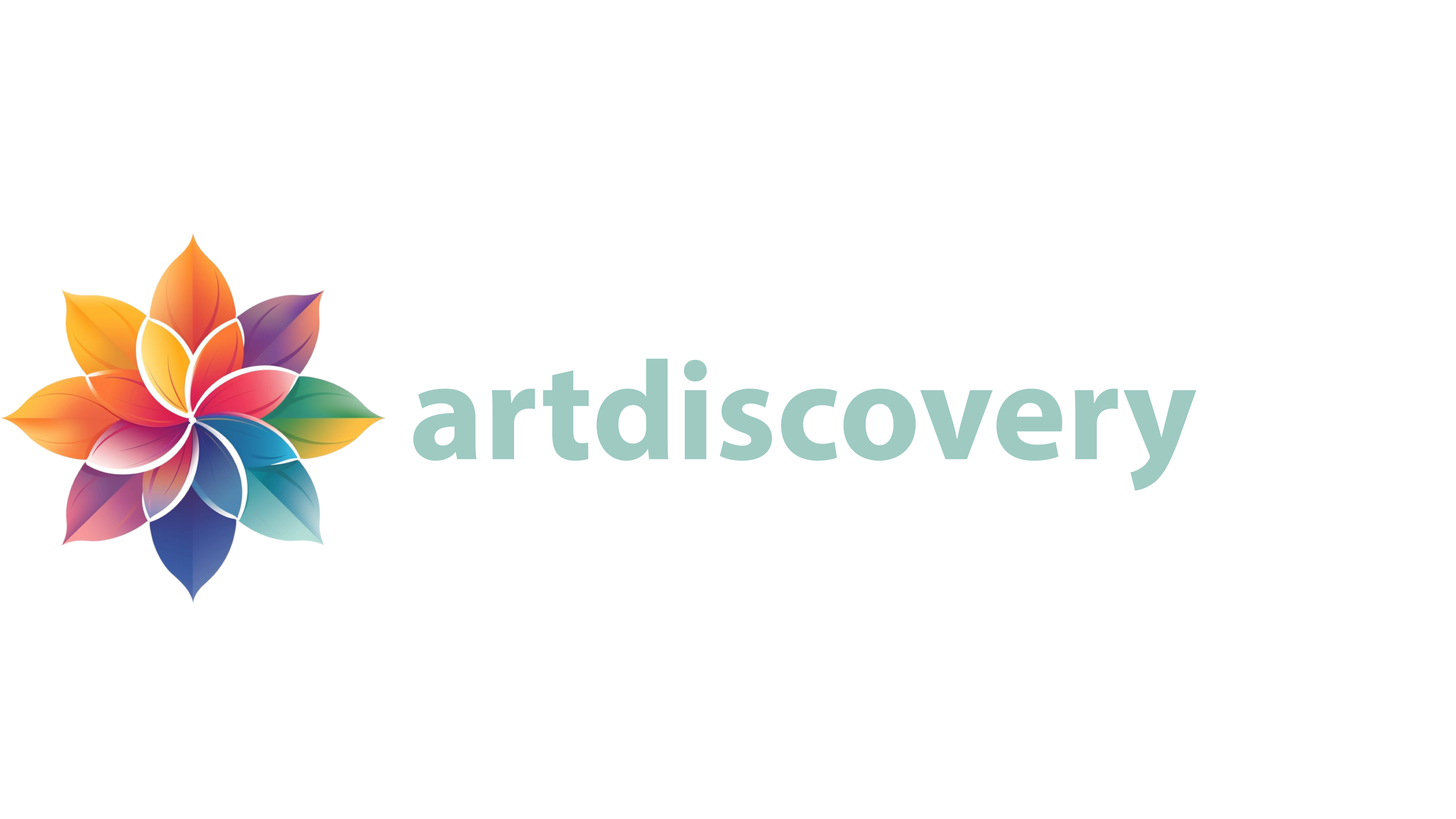
<style>
.page{position:relative;width:1456px;height:819px;background:#ffffff}
.page>*{position:absolute;margin:0}
.t1{font:141.4px "MyriadPro-Bold";color:#9ecac2}
</style>
<div class="page">
<p class="t1" style="left:413px;top:359px;width:783px;height:132px">artdiscovery</p>
</div>
